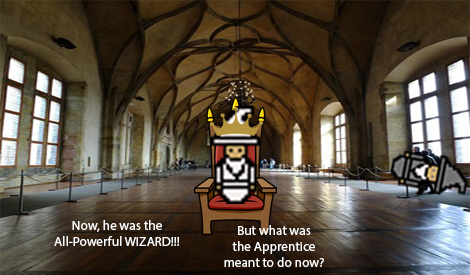
<style>
.page{position:relative;width:470px;height:275px}
.page>*{position:absolute;margin:0}
.t1{font:13.3px "MyriadPro-Regular";color:#ffffff}
</style>
<div class="page">
<p class="t1" style="left:54px;top:220px;width:126px;height:26px;text-align:center">Now, he was the<br>All-Powerful WIZARD!!!</p>
<p class="t1" style="left:224px;top:225px;width:100px;height:42px;text-align:center">But what was<br>the Apprentice<br>meant to do now?</p>
</div>
